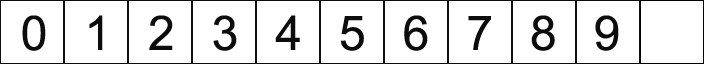
<style>
.page{position:relative;width:704px;height:64px;background:#ffffff}
.page>*{position:absolute;margin:0}
.t1{font:48px "ArialMT";letter-spacing:0.77em;color:#0c0c0c}
</style>
<div class="page">
<p class="t1" style="left:22px;top:15px;width:597px;height:36px">0123456789</p>
</div>
